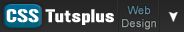
<style>
.page{position:relative;width:184px;height:32px}
.page>*{position:absolute;margin:0}
.t1{font:11px "ArialMT";font-weight:bold}
.t2{font:18px "Gunplay";color:#fefefe;font-weight:bold}
</style>
<div class="page">
<p class="t1" style="left:122px;top:6px;width:34px;height:24px;text-align:center">Web<br>Design</p>
<p class="t2" style="left:6px;top:9px;width:108px;height:16px">CSS Tutsplus</p>
</div>
